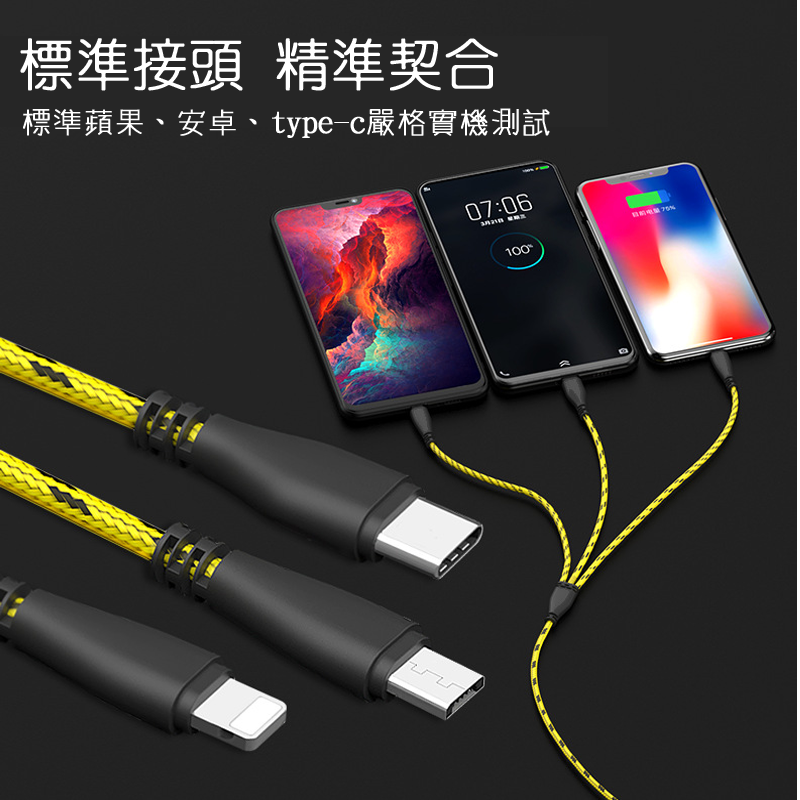
<style>
.page{position:relative;width:800px;height:800px}
.page>*{position:absolute;margin:0}
.t1{font:56px "HanWangYenLight";color:#ffffff;font-weight:bold}
.t2{font:30.7px "winman-tun33014";color:#ffffff;font-weight:bold}
</style>
<div class="page">
<p class="t1" style="left:20px;top:38px;width:478px;height:53px">標準接頭 精準契合</p>
<p class="t2" style="left:23px;top:108px;width:527px;height:30px">標準蘋果、安卓、type-c嚴格實機測試</p>
</div>
